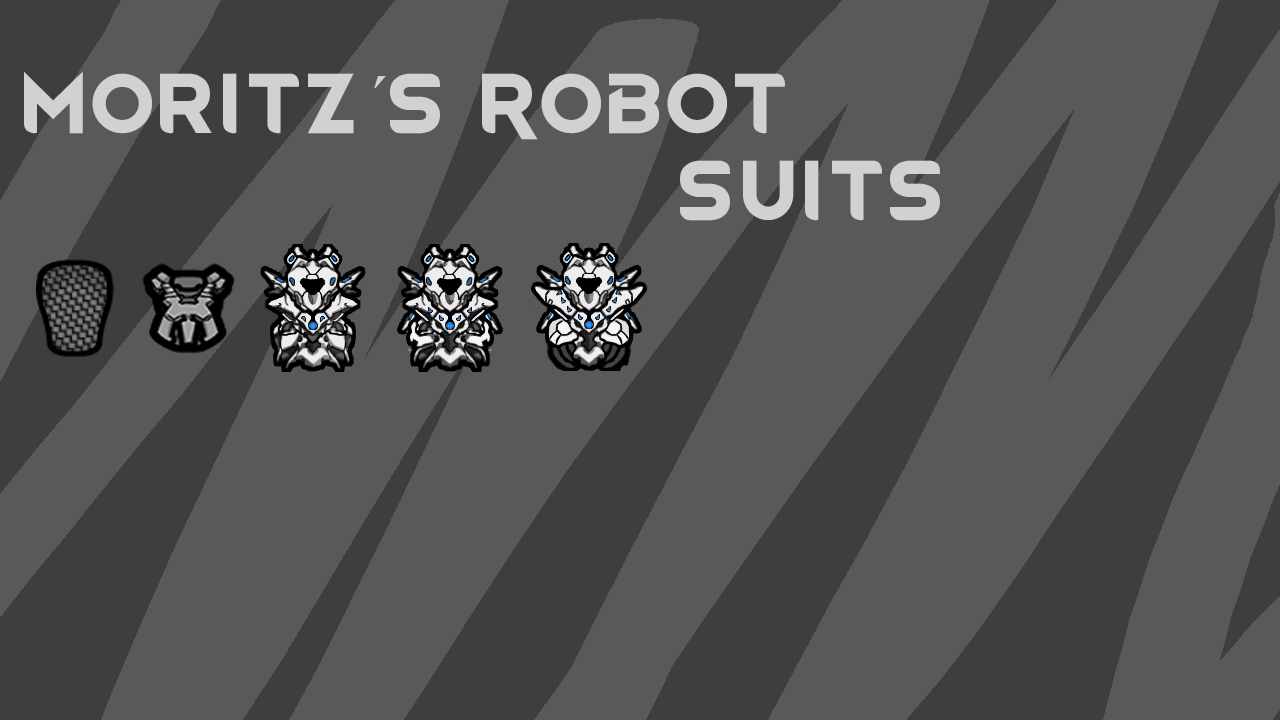
<style>
.page{position:relative;width:1280px;height:720px;background:#595959}
.page>*{position:absolute;margin:0}
.t1{font:72px "RimWordFont";color:#d1d1d1}
.t2{font:72px "TimesNewRomanPSMT";color:#d1d1d1}
</style>
<div class="page">
<p class="t1" style="left:24px;top:71px;width:916px;height:150px">Moritz<span class="t2">´</span>s Robot <br>                      suits</p>
</div>
